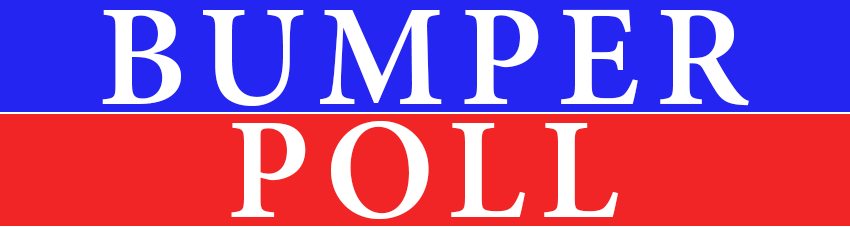
<style>
.page{position:relative;width:850px;height:227px;background:#f12525}
.page>*{position:absolute;margin:0}
.t1{font:144px "MinionPro-Semibold";letter-spacing:0.1em;color:#ffffff}
</style>
<div class="page">
<p class="t1" style="left:102px;top:9px;width:647px;height:97px">BUMPER</p>
<p class="t1" style="left:231px;top:121px;width:387px;height:98px">POLL</p>
</div>
